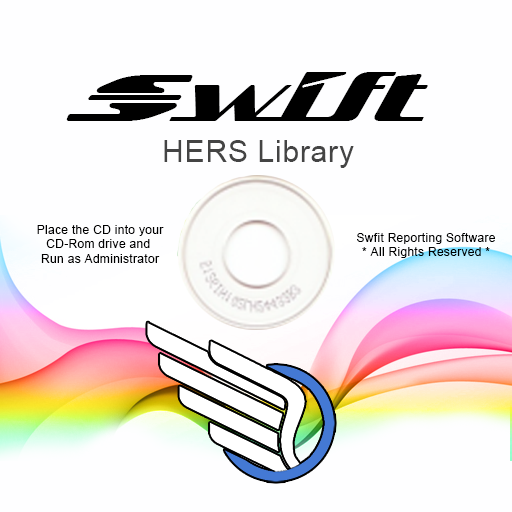
<style>
.page{position:relative;width:512px;height:512px;background:#fefeff}
.page>*{position:absolute;margin:0}
.t1{font:62px "SandovalSpeed-Regular";letter-spacing:0.025em;color:#000000}
.t2{font:30px "ArialMT";letter-spacing:0.025em;color:#444444}
.t3{font:12px "ArialMT";letter-spacing:0.025em;color:#000000}
</style>
<div class="page">
<p class="t1" style="left:66px;top:72px;width:362px;height:49px">Swift</p>
<p class="t2" style="left:164px;top:140px;width:190px;height:28px">HERS Library</p>
<p class="t3" style="left:37px;top:225px;width:127px;height:38px;text-align:center">Place the CD into your<br>CD-Rom drive and <br>Run as Administrator</p>
<p class="t3" style="left:357px;top:233px;width:138px;height:25px;text-align:center">Swfit Reporting Software<br>* All Rights Reserved *</p>
</div>
